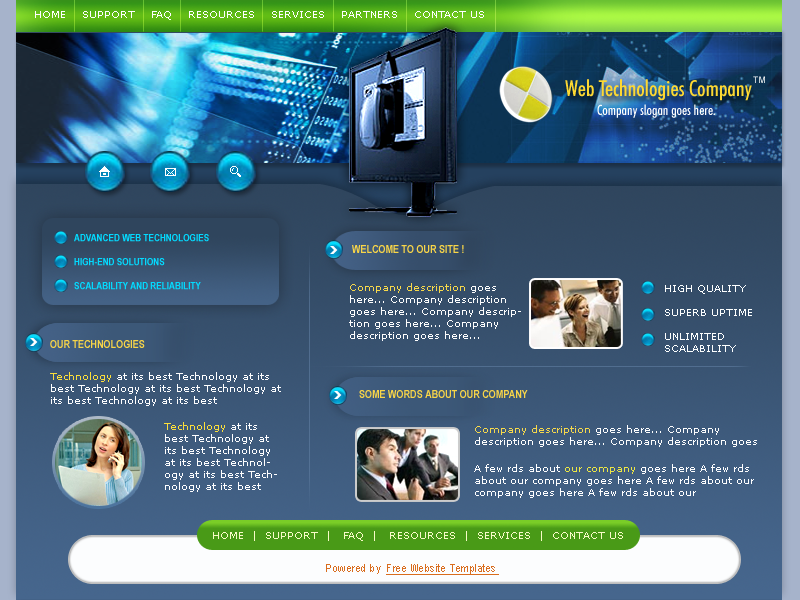
<style>
.page{position:relative;width:800px;height:600px}
.page>*{position:absolute;margin:0}
.t1{font:10px "Verdana";color:#fefeff}
.t2{font:9px "ArialMT";color:#fefefc}
.t3{font:22px "FuturaBT-MediumCondensed";color:#fdd832}
.t4{font:14px "FuturaBT-MediumCondensed";color:#fefefd}
.t5{font:10px "ArialNarrow-Bold";color:#03daff}
.t6{font:11px "ArialNarrow-Bold";color:#f8d548}
.t7{font:10px "Verdana";color:#fdfdfd}
.t8{font:10px "Verdana";color:#f6d84b}
.t9{font:10px "Verdana";color:#fdffff}
.t10{font:10px "Verdana";color:#fbde3b}
.t11{font:10px "Verdana";color:#ece644}
.t12{font:10px "Verdana";color:#f8fbc8}
.t13{font:11px "ArialNarrow";letter-spacing:0.05em;color:#d96d1e;text-decoration:underline}
.t14{font:11px "ArialNarrow";letter-spacing:0.05em;color:#d96d1e}
</style>
<div class="page">
<p class="t1" style="left:35px;top:11px;width:449px;height:9px">HOME    SUPPORT    FAQ    RESOURCES    SERVICES    PARTNERS    CONTACT US</p>
<p class="t2" style="left:753px;top:76px;width:12px;height:7px">TM</p>
<p class="t3" style="left:565px;top:79px;width:187px;height:22px">Web Technologies Company</p>
<p class="t4" style="left:597px;top:104px;width:118px;height:14px">Company slogan goes here.</p>
<p class="t5" style="left:74px;top:234px;width:135px;height:56px">ADVANCED WEB TECHNOLOGIES<br><br>HIGH-END SOLUTIONS<br><br>SCALABILITY AND RELIABILITY</p>
<p class="t6" style="left:352px;top:245px;width:112px;height:8px">WELCOME TO OUR SITE !</p>
<p class="t7" style="left:349px;top:283px;width:172px;height:58px"><span class="t8">Company description</span> goes here... Company description goes here... Company description goes here... Company description goes here...</p>
<p class="t9" style="left:665px;top:285px;width:87px;height:67px">HIGH QUALITY<br><br>SUPERB UPTIME<br><br>UNLIMITED   SCALABILITY</p>
<p class="t6" style="left:50px;top:340px;width:95px;height:8px">OUR TECHNOLOGIES</p>
<p class="t1" style="left:50px;top:372px;width:231px;height:34px"><span class="t10">Technology </span>at its best Technology at its best Technology at its best Technology at its best Technology at its best</p>
<p class="t6" style="left:359px;top:390px;width:169px;height:8px">SOME WORDS ABOUT OUR COMPANY</p>
<p class="t1" style="left:164px;top:422px;width:113px;height:70px"><span class="t10">Technology </span>at its best Technology at its best Technology at its best Technology at its best Technology at its best</p>
<p class="t7" style="left:475px;top:425px;width:282px;height:22px"><span class="t8">Company description</span> goes here... Company description goes here... Company description goes</p>
<p class="t1" style="left:474px;top:464px;width:280px;height:34px">A few rds about <span class="t11">our company</span> goes here A few rds about our company goes here A few rds about our company goes here A few rds about our</p>
<p class="t12" style="left:213px;top:531px;width:410px;height:10px">HOME  |  SUPPORT  |   FAQ  |   RESOURCES  |  SERVICES  |  CONTACT US</p>
<p class="t13" style="left:326px;top:564px;width:173px;height:11px"><span class="t14">Powered by </span>Free Website Templates</p>
</div>
